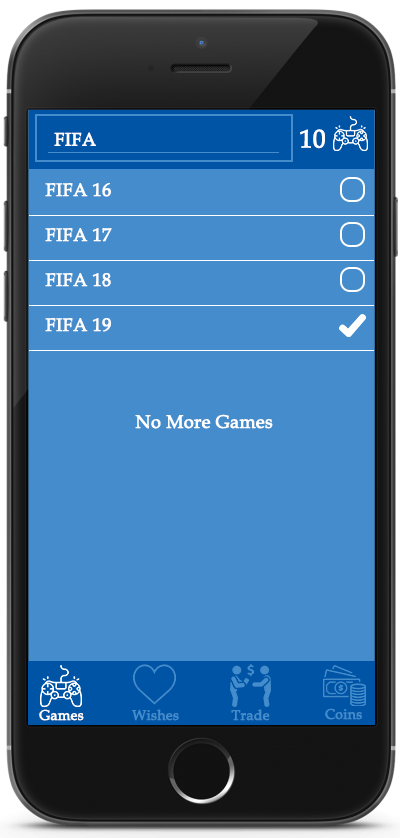
<style>
.page{position:relative;width:400px;height:838px;background:#448ccb}
.page>*{position:absolute;margin:0}
.t1{font:18px "BookAntiqua";color:#ffffff;font-weight:bold}
.t2{font:25px "BookAntiqua";color:#ffffff;font-weight:bold}
.t3{font:14px "BookAntiqua";color:#ffffff;font-weight:bold}
.t4{font:14px "BookAntiqua";color:#448ccb;font-weight:bold}
</style>
<div class="page">
<p class="t1" style="left:54px;top:132px;width:42px;height:14px">FIFA</p>
<p class="t2" style="left:300px;top:129px;width:25px;height:20px">10</p>
<p class="t1" style="left:45px;top:183px;width:66px;height:14px">FIFA 16</p>
<p class="t1" style="left:45px;top:228px;width:67px;height:14px">FIFA 17</p>
<p class="t1" style="left:45px;top:273px;width:66px;height:14px">FIFA 18</p>
<p class="t1" style="left:45px;top:318px;width:66px;height:14px">FIFA 19</p>
<p class="t1" style="left:135px;top:414px;width:138px;height:15px">No More Games</p>
<p class="t3" style="left:39px;top:709px;width:45px;height:12px">Games</p>
<p class="t4" style="left:132px;top:709px;width:47px;height:12px">Wishes</p>
<p class="t4" style="left:231px;top:709px;width:39px;height:12px">Trade</p>
<p class="t4" style="left:325px;top:708px;width:37px;height:12px">Coins</p>
</div>
